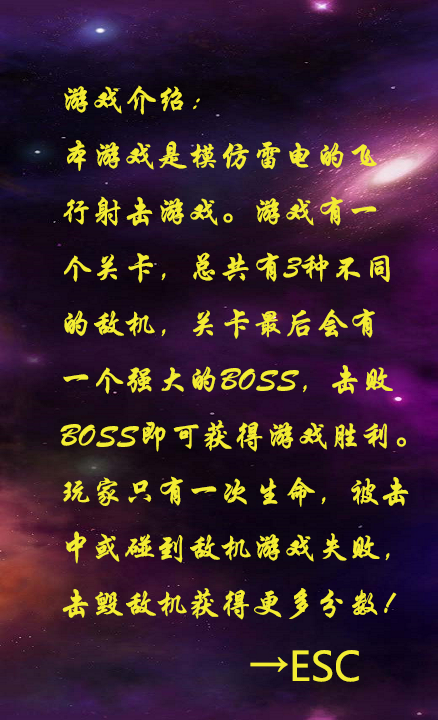
<style>
.page{position:relative;width:438px;height:720px}
.page>*{position:absolute;margin:0}
.t1{font:32px "STXingkai";color:#f3ec32}
.t2{font:40px "MicrosoftYaHei";color:#f3ec32}
</style>
<div class="page">
<p class="t1" style="left:60px;top:85px;width:349px;height:535px">游戏介绍：<br>本游戏是模仿雷电的飞<br>行射击游戏。游戏有一<br>个关卡，总共有3种不同<br>的敌机，关卡最后会有<br>一个强大的BOSS，击败<br>BOSS即可获得游戏胜利。<br>玩家只有一次生命，被击<br>中或碰到敌机游戏失败，<br>击毁敌机获得更多分数！</p>
<p class="t2" style="left:250px;top:650px;width:109px;height:32px">→ESC</p>
</div>
